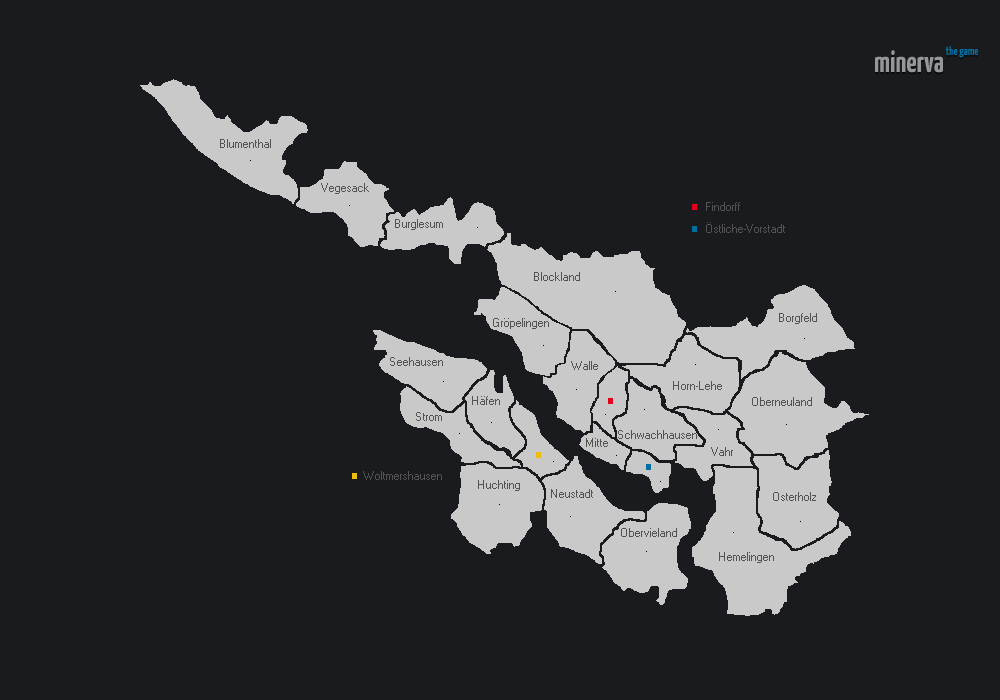
<style>
.page{position:relative;width:1000px;height:700px;background:#191b1e}
.page>*{position:absolute;margin:0}
.t1{font:30px "YanoneKaffeesatz-Bold";color:#959798}
.t2{font:12px "YanoneKaffeesatz-Bold";color:#0b73a4}
.t3{font:8px "MS Sans Serif";color:#535353}
</style>
<div class="page">
<p class="t1" style="left:875px;top:50px;width:68px;height:23px">minerva</p>
<p class="t2" style="left:945px;top:46px;width:33px;height:12px">the game</p>
<p class="t3" style="left:220px;top:139px;width:51px;height:9px">Blumenthal</p>
<p class="t3" style="left:321px;top:183px;width:48px;height:11px">Vegesack</p>
<p class="t3" style="left:706px;top:202px;width:34px;height:9px">Findorff</p>
<p class="t3" style="left:395px;top:219px;width:48px;height:11px">Burglesum</p>
<p class="t3" style="left:706px;top:222px;width:79px;height:11px">Östliche-Vorstadt</p>
<p class="t3" style="left:534px;top:272px;width:46px;height:9px">Blockland</p>
<p class="t3" style="left:493px;top:318px;width:56px;height:11px">Gröpelingen</p>
<p class="t3" style="left:779px;top:313px;width:38px;height:11px">Borgfeld</p>
<p class="t3" style="left:390px;top:357px;width:53px;height:9px">Seehausen</p>
<p class="t3" style="left:571px;top:361px;width:27px;height:9px">Walle</p>
<p class="t3" style="left:673px;top:381px;width:49px;height:9px">Horn-Lehe</p>
<p class="t3" style="left:472px;top:396px;width:28px;height:9px">Häfen</p>
<p class="t3" style="left:752px;top:397px;width:60px;height:9px">Oberneuland</p>
<p class="t3" style="left:416px;top:412px;width:26px;height:9px">Strom</p>
<p class="t3" style="left:586px;top:438px;width:22px;height:9px">Mitte</p>
<p class="t3" style="left:618px;top:430px;width:79px;height:9px">Schwachhausen</p>
<p class="t3" style="left:711px;top:447px;width:22px;height:9px">Vahr</p>
<p class="t3" style="left:363px;top:471px;width:79px;height:9px">Woltmershausen</p>
<p class="t3" style="left:478px;top:480px;width:42px;height:11px">Huchting</p>
<p class="t3" style="left:551px;top:489px;width:42px;height:9px">Neustadt</p>
<p class="t3" style="left:773px;top:492px;width:43px;height:9px">Osterholz</p>
<p class="t3" style="left:621px;top:528px;width:56px;height:9px">Obervieland</p>
<p class="t3" style="left:719px;top:552px;width:55px;height:11px">Hemelingen</p>
</div>
